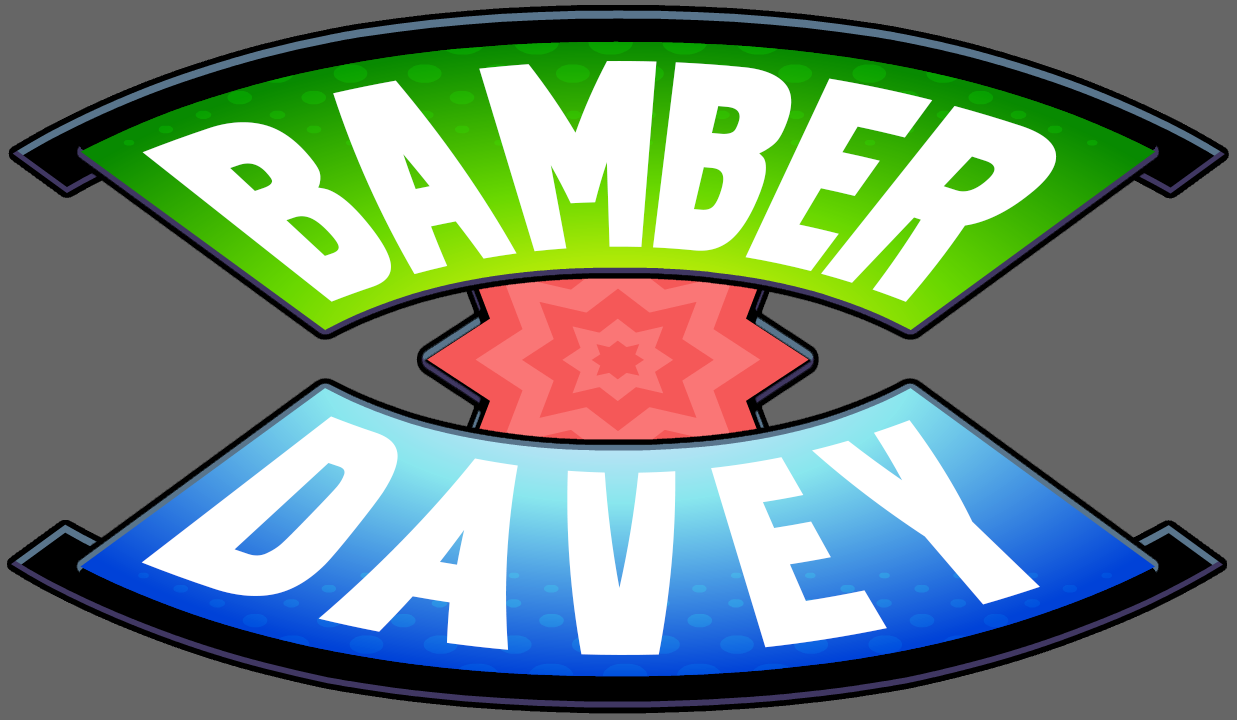
<style>
.page{position:relative;width:1237px;height:720px;background:#666666}
.page>*{position:absolute;margin:0}
.t1{font:207.3px "DinovaBlack";color:#ffffff;scale:0.8 1}
.t2{font:205.8px "DinovaBlack";letter-spacing:0.075em;color:#ffffff;scale:0.93 1}
.t3{font:205.8px "DinovaBlack";letter-spacing:0.13em;color:#ffffff;scale:0.93 1}
.t4{font:205.8px "DinovaBlack";color:#ffffff;scale:0.93 1}
</style>
<div class="page">
<p class="t1" style="left:142px;top:61px;width:915px;height:241px">BAMBER</p>
<p class="t2" style="left:141px;top:416px;width:899px;height:239px">DA<span class="t3">VE</span><span class="t4">Y</span></p>
</div>
